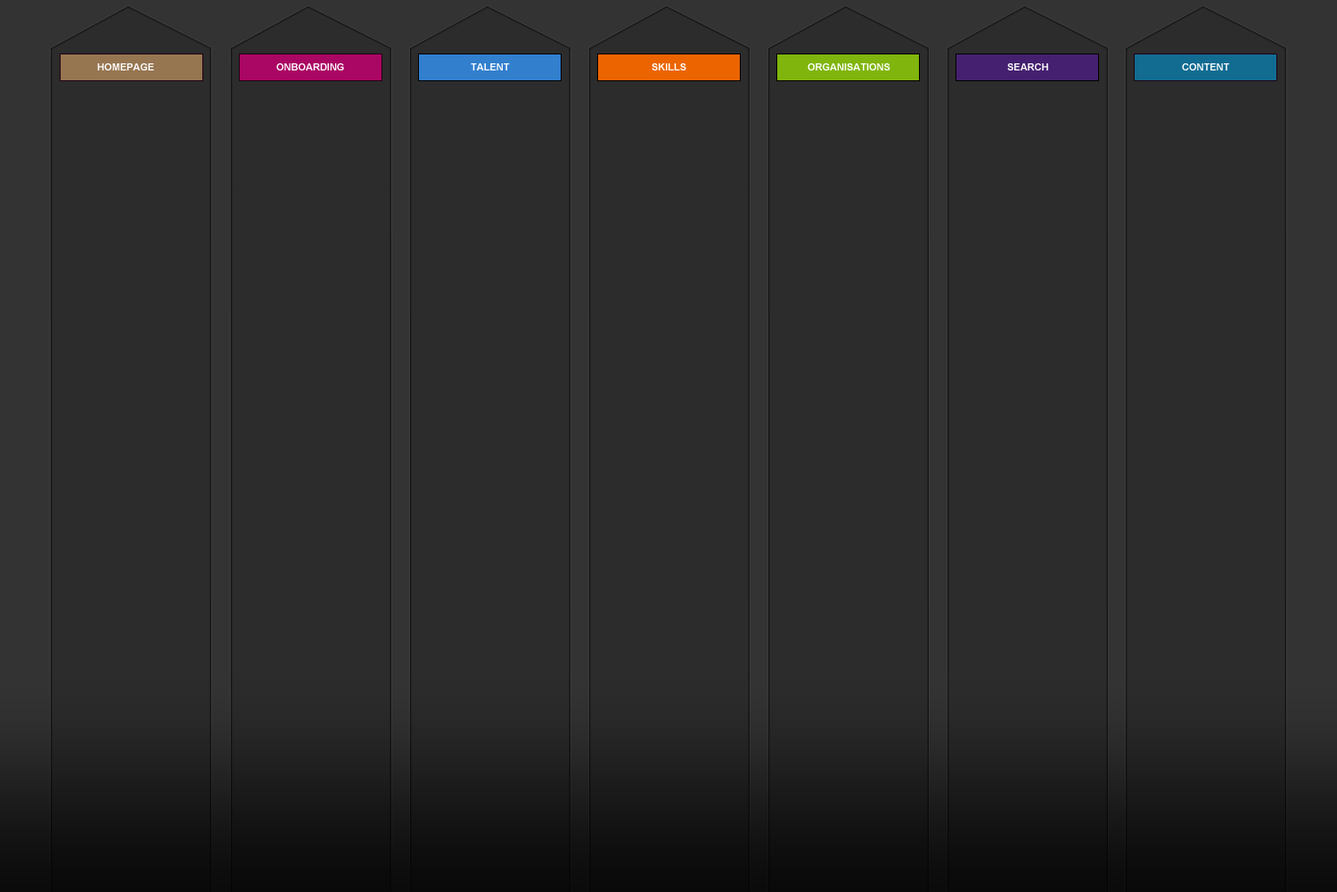
<style>
.page{position:relative;width:1337px;height:892px;background:#2c2c2c}
.page>*{position:absolute;margin:0}
.t1{font:9.8px "Arial-BoldMT";color:#ffffff;text-transform:uppercase}
</style>
<div class="page">
<p class="t1" style="left:97px;top:63px;width:57px;height:7px">homepage</p>
<p class="t1" style="left:276px;top:63px;width:68px;height:7px">ONBOARDING</p>
<p class="t1" style="left:471px;top:63px;width:39px;height:7px">TALENT</p>
<p class="t1" style="left:652px;top:63px;width:35px;height:7px">SKILLS</p>
<p class="t1" style="left:808px;top:63px;width:83px;height:7px">organisations</p>
<p class="t1" style="left:1008px;top:63px;width:41px;height:7px">search</p>
<p class="t1" style="left:1182px;top:63px;width:48px;height:7px">CONTENT</p>
</div>
